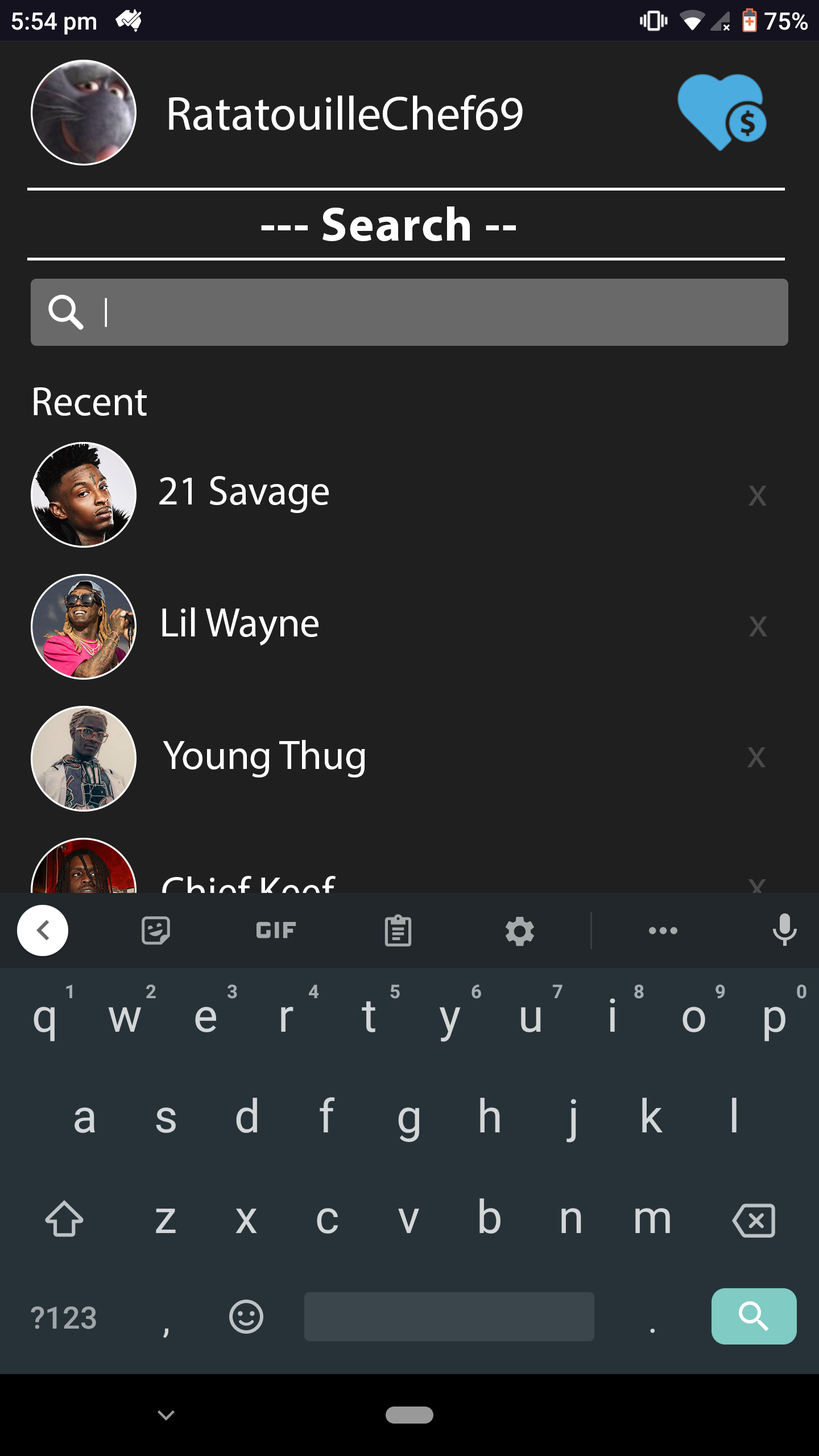
<style>
.page{position:relative;width:819px;height:1456px;background:#1f1f1f}
.page>*{position:absolute;margin:0}
.t1{font:48.3px "MyriadPro-Regular";color:#ffffff}
.t2{font:48.3px "MyriadPro-Bold";letter-spacing:0.025em;color:#ffffff}
.t3{font:28.9px "MyriadPro-Regular";color:#ffffff}
.t4{font:40.9px "MyriadPro-Regular";color:#ffffff}
.t5{font:40.9px "MyriadPro-Regular";color:#494949}
.t6{font:40.9px "MyriadPro-Regular"}
</style>
<div class="page">
<p class="t1" style="left:169px;top:95px;width:354px;height:35px">RatatouilleChef69</p>
<p class="t2" style="left:261px;top:206px;width:255px;height:35px">--- Search --</p>
<p class="t3" style="left:105px;top:298px;width:2px;height:29px">|</p>
<p class="t4" style="left:34px;top:387px;width:113px;height:29px">Recent</p>
<p class="t4" style="left:159px;top:476px;width:170px;height:37px">21 Savage</p>
<p class="t5" style="left:748px;top:486px;width:19px;height:20px">x</p>
<p class="t4" style="left:162px;top:607px;width:156px;height:39px">Lil Wayne</p>
<p class="t5" style="left:749px;top:617px;width:18px;height:19px">x</p>
<p class="t4" style="left:163px;top:740px;width:202px;height:37px">Young Thug</p>
<p class="t5" style="left:747px;top:747px;width:19px;height:20px">x</p>
<p class="t6" style="left:162px;top:876px;width:174px;height:30px">Chief Keef</p>
<p class="t5" style="left:748px;top:879px;width:18px;height:20px">x</p>
</div>
